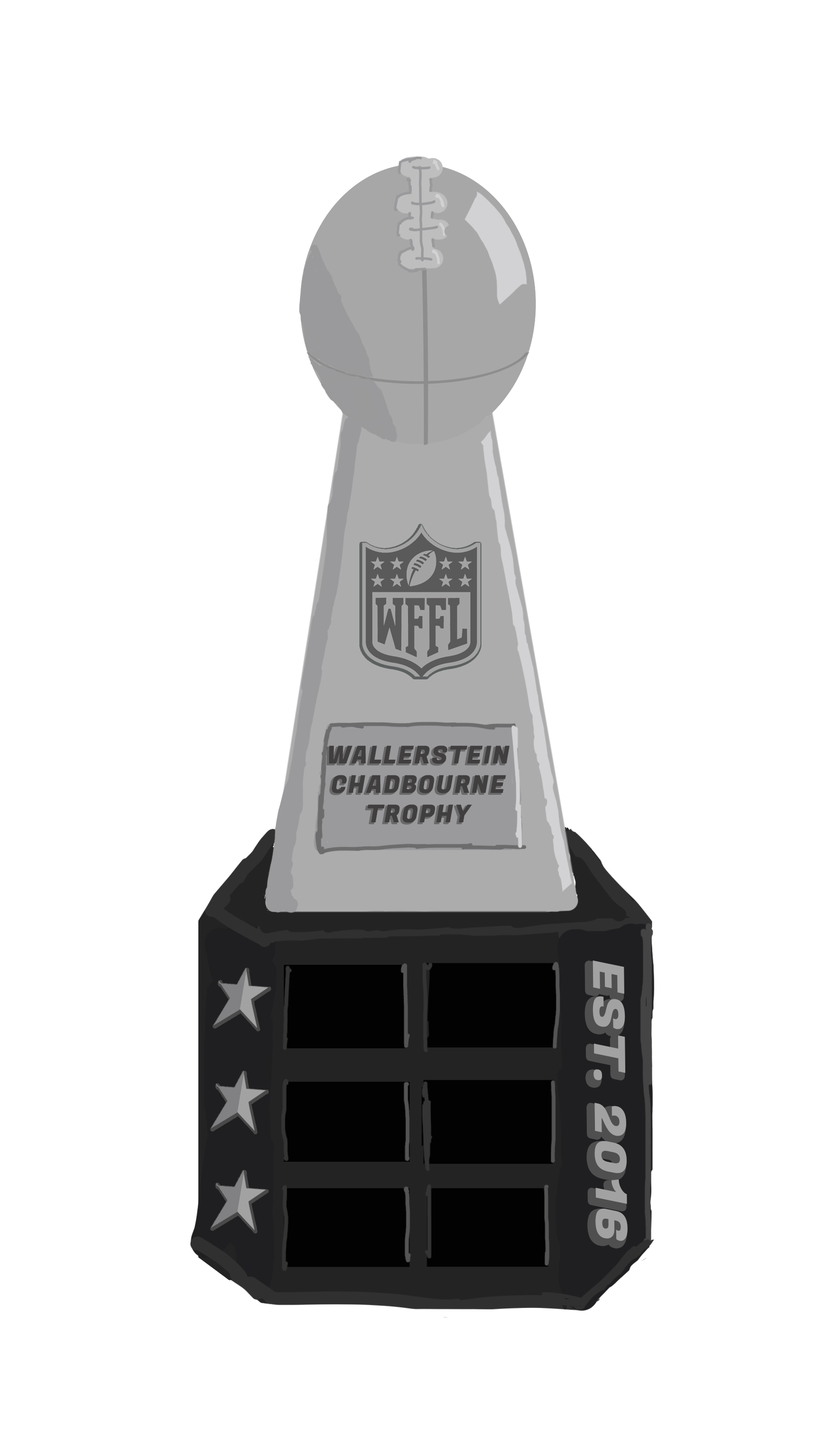
<style>
.page{position:relative;width:828px;height:1440px;background:#ffffff}
.page>*{position:absolute;margin:0}
.t1{font:24.5px "FugazOne-Regular";letter-spacing:0.05em;color:#403e3e}
.t2{font:43px "FugazOne-Regular";letter-spacing:0.05em;color:#a2a2a2;scale:1.24 1}
</style>
<div class="page">
<p class="t1" style="left:329px;top:745px;width:181px;height:78px;text-align:center">WALLERSTEIN<br>CHADBOURNE<br>TROPHY</p>
<p class="t2" style="left:593px;top:961px;width:35px;height:280px;rotate:89deg">EST. 2016</p>
</div>
